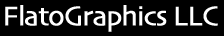
<style>
.page{position:relative;width:224px;height:36px;background:#000000}
.page>*{position:absolute;margin:0}
.t1{font:28px "Skia-Regular";letter-spacing:-0.05em;color:#ffffff;font-weight:bold}
</style>
<div class="page">
<p class="t1" style="left:5px;top:5px;width:213px;height:27px">FlatoGraphics LLC</p>
</div>
